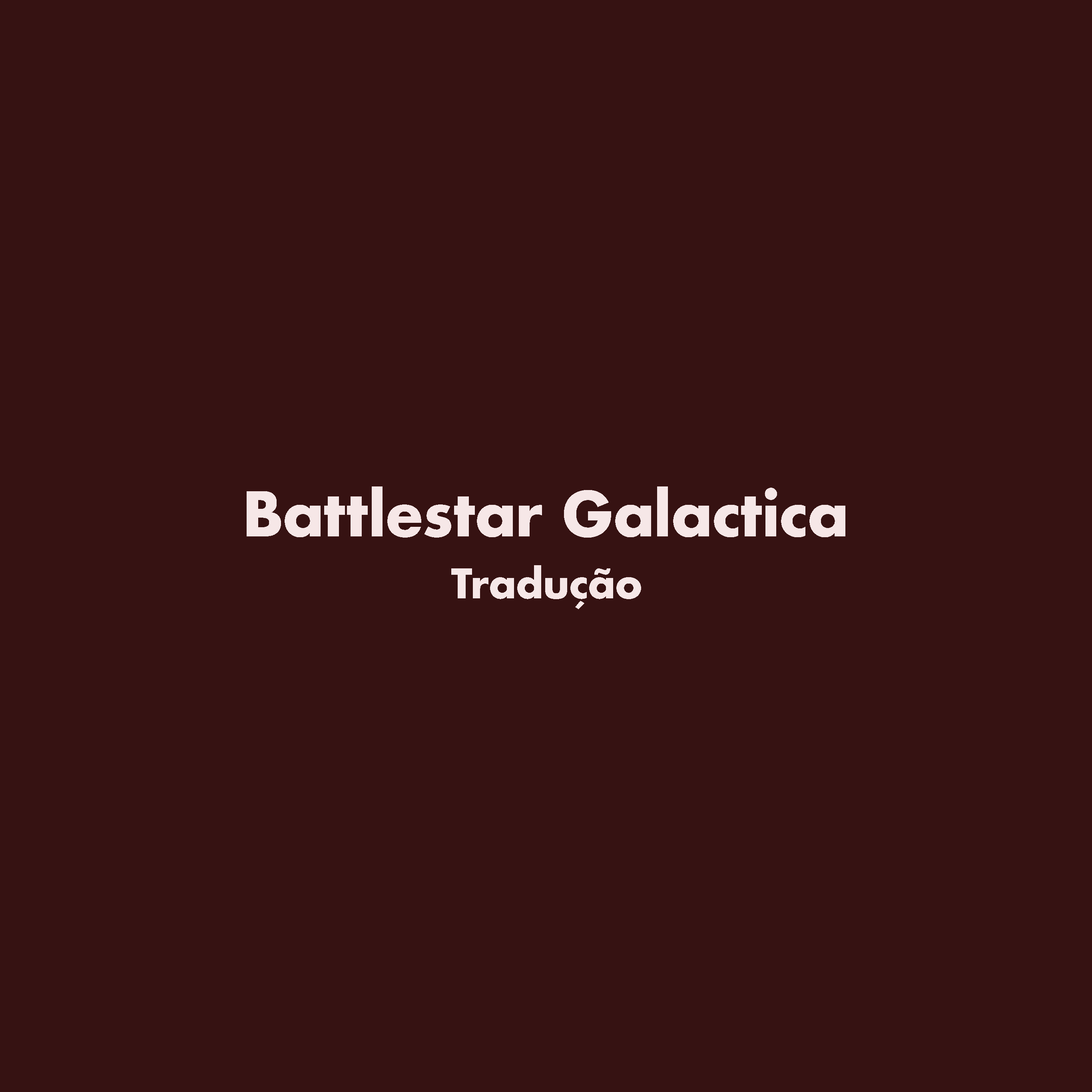
<style>
.page{position:relative;width:1092px;height:1092px;background:#361212}
.page>*{position:absolute;margin:0}
.t1{font:60px "Futura-Bold";letter-spacing:-0.02em;color:#f6e7e7}
.t2{font:40px "Futura-Bold";letter-spacing:-0.02em;color:#f6e7e7}
</style>
<div class="page">
<p class="t1" style="left:247px;top:486px;width:598px;height:52px">Battlestar Galactica</p>
<p class="t2" style="left:451px;top:565px;width:190px;height:44px">Tradução</p>
</div>
